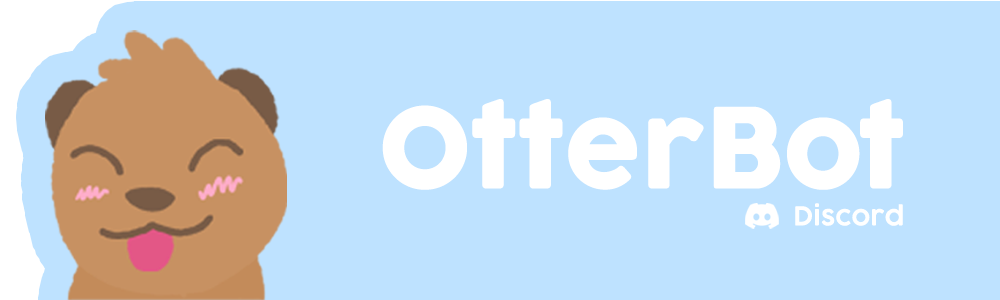
<style>
.page{position:relative;width:1000px;height:300px;background:#bee2ff}
.page>*{position:absolute;margin:0}
.t1{font:110px "Cocogoose";color:#ffffff}
.t2{font:25.7px "COCOGOOSE-DemiBold";color:#ffffff}
</style>
<div class="page">
<p class="t1" style="left:382px;top:99px;width:521px;height:91px">OtterBot</p>
<p class="t2" style="left:795px;top:203px;width:108px;height:23px">Discord</p>
</div>
